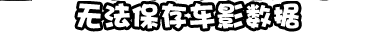
<style>
.page{position:relative;width:376px;height:32px;background:#ffffff}
.page>*{position:absolute;margin:0}
.t1{font:28px "DFPHaiBaoW12";letter-spacing:0.01em;color:#ffffff}
</style>
<div class="page">
<p class="t1" style="left:77px;top:3px;width:222px;height:26px">无法保存车影数据</p>
</div>
